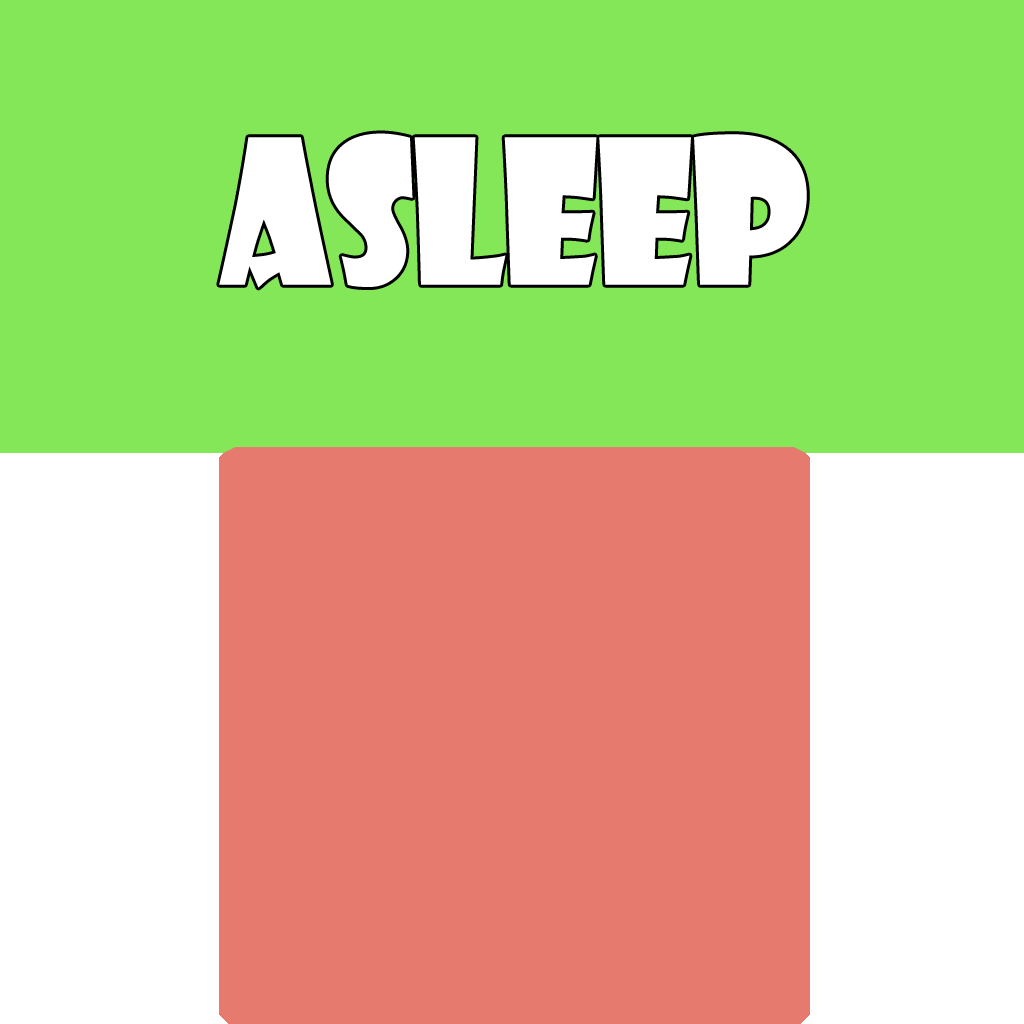
<style>
.page{position:relative;width:1024px;height:1024px;background:#84e757}
.page>*{position:absolute;margin:0}
.t1{font:196.1px "ShowcardGothic-Reg";letter-spacing:-0.025em;color:#ffffff;scale:0.91 1}
</style>
<div class="page">
<p class="t1" style="left:219px;top:133px;width:588px;height:155px">Asleep</p>
</div>
